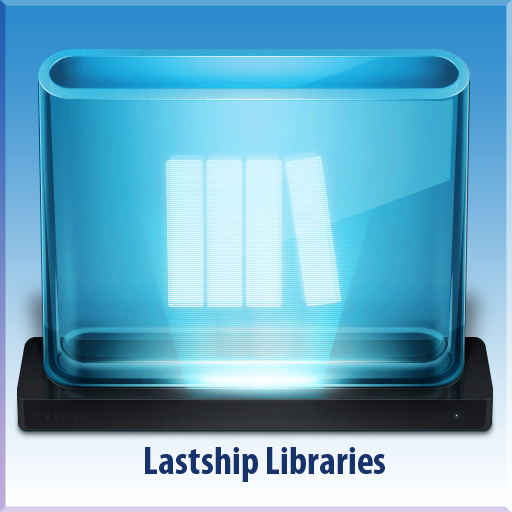
<style>
.page{position:relative;width:512px;height:512px}
.page>*{position:absolute;margin:0}
.t1{font:40px "MyriadPro-BoldCond";color:#18326b}
</style>
<div class="page">
<p class="t1" style="left:145px;top:447px;width:240px;height:35px">Lastship Libraries</p>
</div>
